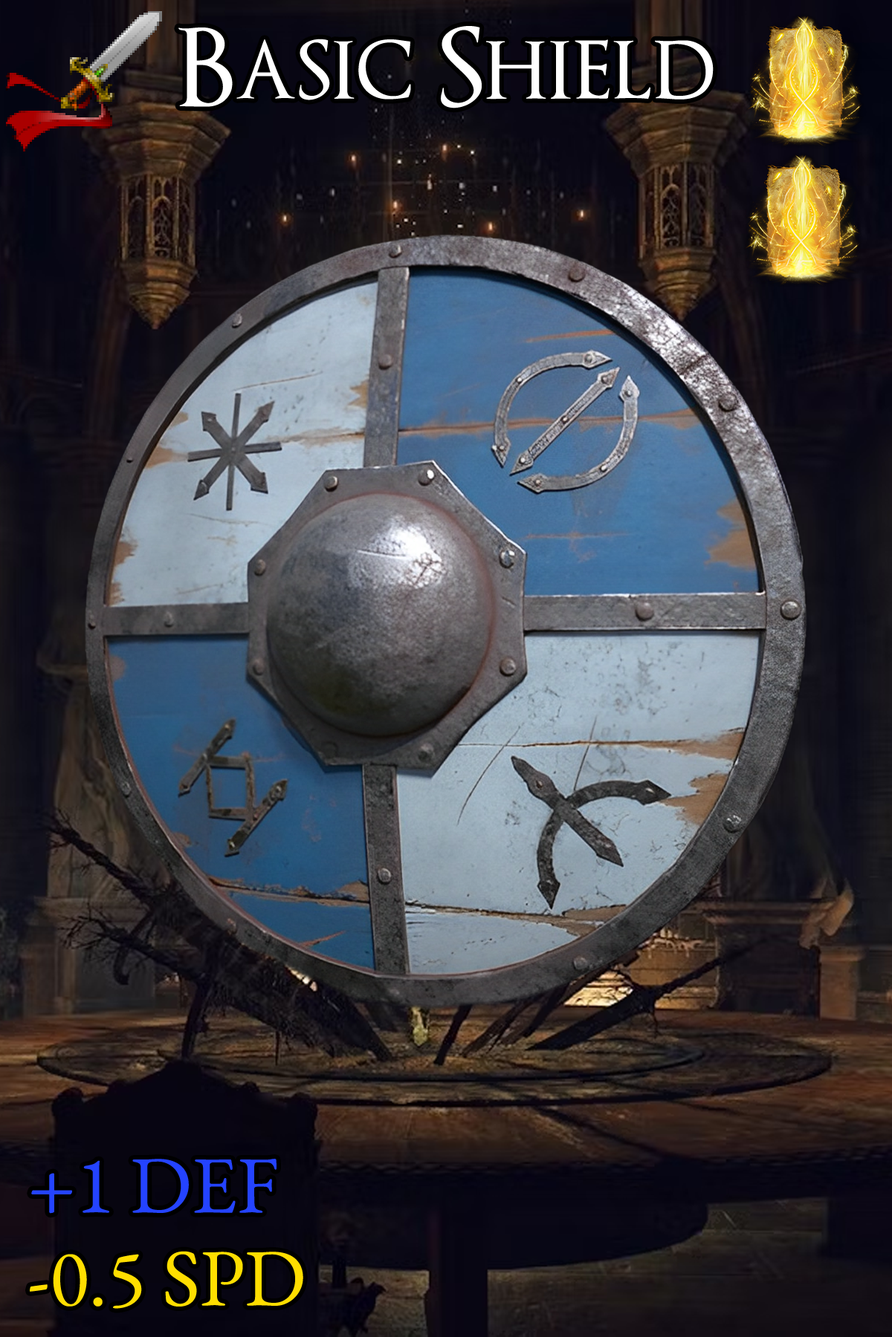
<style>
.page{position:relative;width:892px;height:1337px}
.page>*{position:absolute;margin:0}
.t1{font:180.6px "OptimusPrinceps";color:#ffffff}
.t2{font:138.9px/92.9px "EBGaramond-Regular";color:#ffde00}
.t3{font:138.9px/92.9px "EBGaramond-Regular";color:#2443ff}
</style>
<div class="page">
<p class="t1" style="left:178px;top:26px;width:535px;height:82px">Basic Shield</p>
<p class="t2" style="left:30px;top:1159px;width:273px;height:150px"><span class="t3">+1 DEF<br></span>-0.5 SPD</p>
</div>
